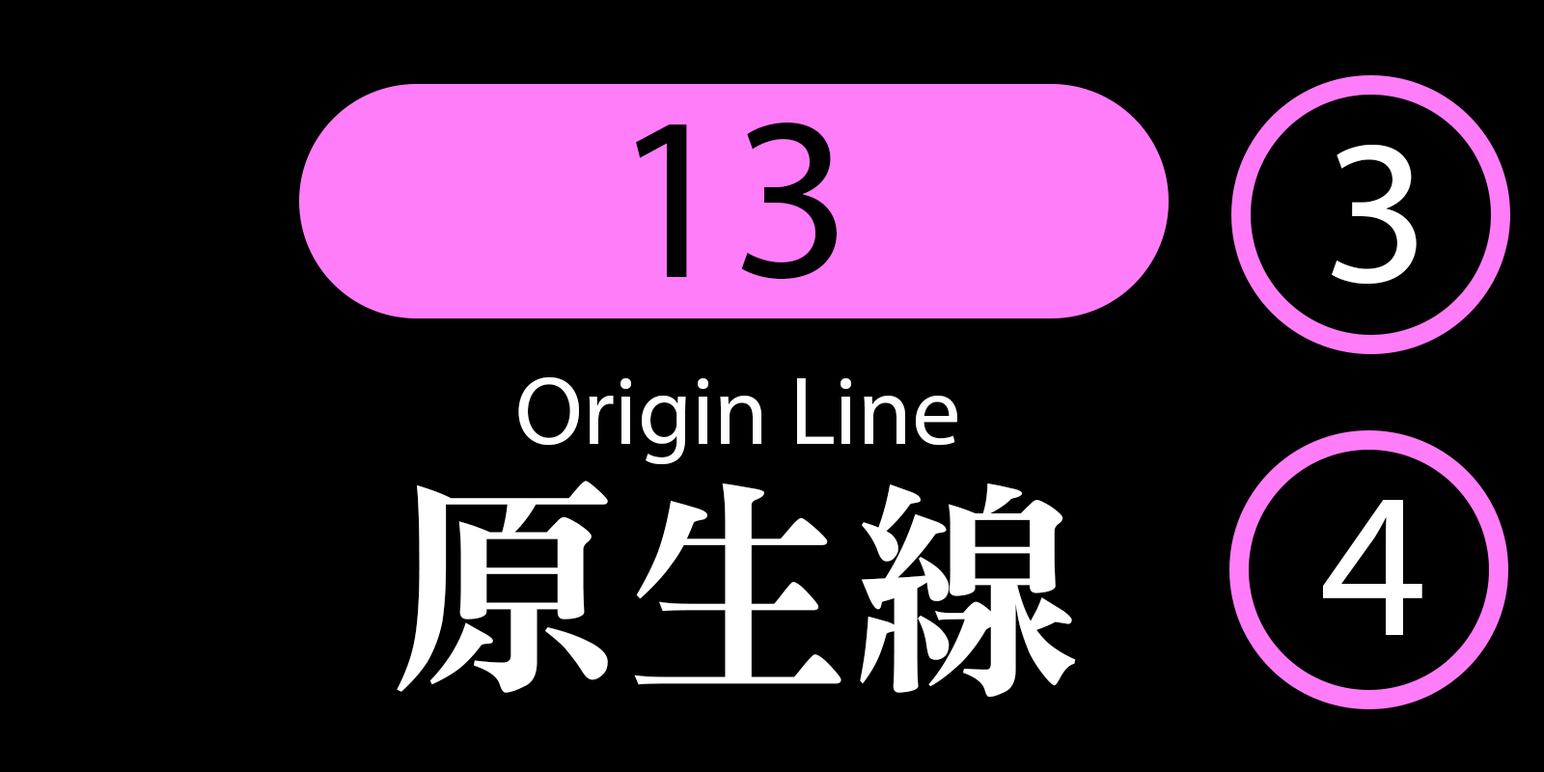
<style>
.page{position:relative;width:1544px;height:772px;background:#000000}
.page>*{position:absolute;margin:0}
.t1{font:233.9px "MyriadPro-Regular";color:#000000}
.t2{font:207.9px "MyriadPro-Regular";color:#ffffff}
.t3{font:97.4px "MyriadPro-Regular";color:#ffffff}
.t4{font:231.3px "MTR-Sung";color:#ffffff}
</style>
<div class="page">
<p class="t1" style="left:636px;top:122px;width:201px;height:157px">13</p>
<p class="t2" style="left:1332px;top:145px;width:85px;height:139px">3</p>
<p class="t3" style="left:518px;top:376px;width:439px;height:89px">Origin Line</p>
<p class="t4" style="left:397px;top:481px;width:679px;height:217px">原生線</p>
<p class="t2" style="left:1323px;top:500px;width:100px;height:135px">4</p>
</div>
